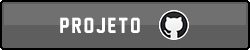
<style>
.page{position:relative;width:250px;height:50px;background:#5e5e5e}
.page>*{position:absolute;margin:0}
.t1{font:20px "Jetpackia";letter-spacing:0.1em;color:#ffffff;text-transform:uppercase}
</style>
<div class="page">
<p class="t1" style="left:60px;top:17px;width:80px;height:16px">Projeto</p>
</div>
